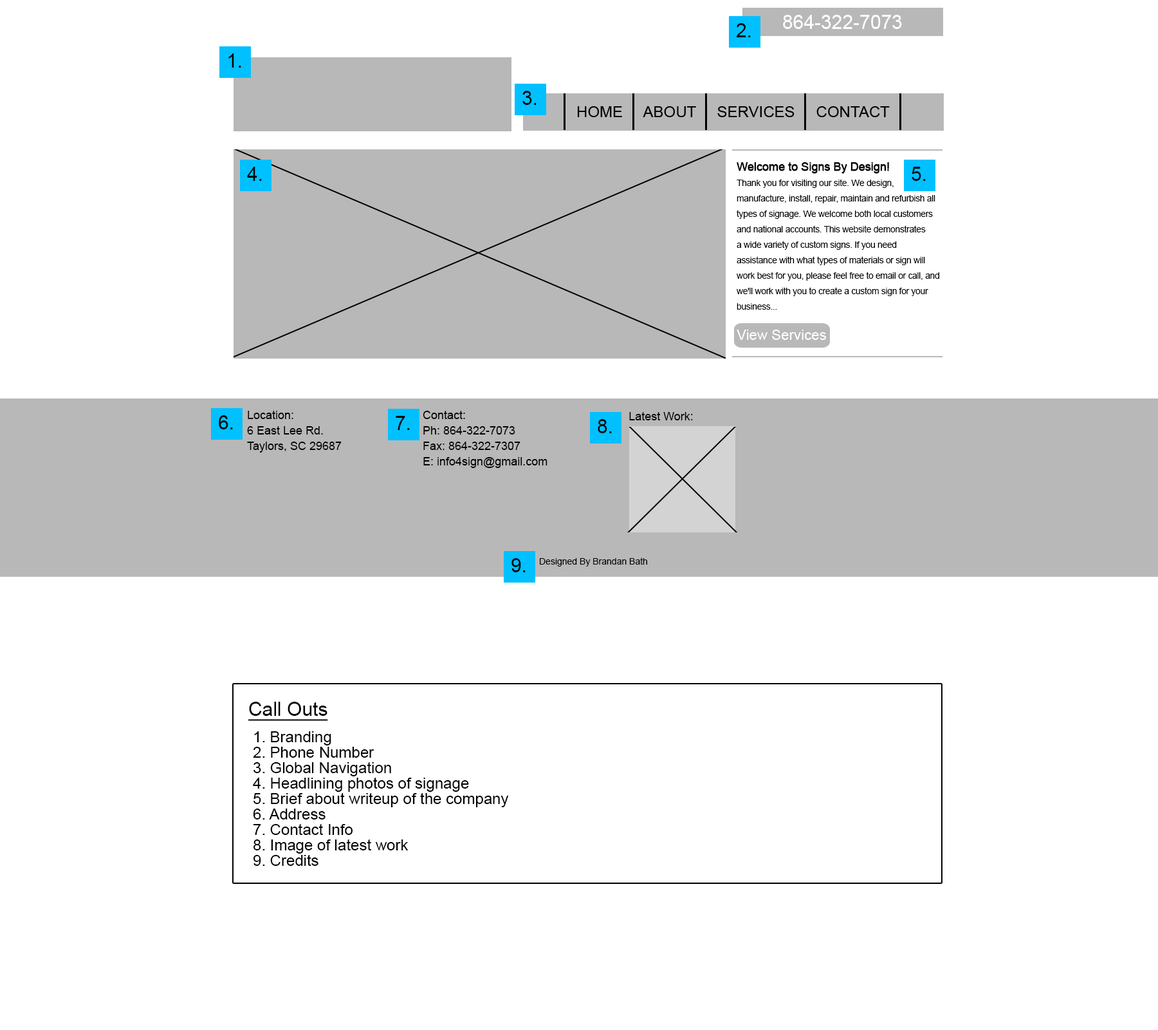
<style>
.page{position:relative;width:1158px;height:1030px;background:#ffffff}
.page>*{position:absolute;margin:0}
.t1{font:19.3px "ArialMT";color:#ffffff}
.t2{font:19.3px "ArialMT";color:#000203}
.t3{font:9px/15.4px "ArialMT";letter-spacing:-0.025em;color:#000000}
.t4{font:11.6px/15.4px "ArialMT";letter-spacing:-0.025em;color:#000000;font-weight:bold}
.t5{font:14.3px "ArialMT";color:#ffffff}
.t6{font:11.6px/15.4px "ArialMT";color:#000000}
.t7{font:11.6px "ArialMT";color:#000000}
.t8{font:9px "ArialMT";color:#000000}
.t9{font:19.3px "ArialMT";color:#000000;text-decoration:underline}
.t10{font:15.4px/15.4px "ArialMT";color:#000000}
</style>
<div class="page">
<p class="t1" style="left:783px;top:15px;width:119px;height:14px">864-322-7073</p>
<p class="t2" style="left:736px;top:23px;width:15px;height:14px">2.</p>
<p class="t2" style="left:228px;top:53px;width:13px;height:15px">1.</p>
<p class="t2" style="left:522px;top:91px;width:15px;height:14px">3.</p>
<p class="t2" style="left:247px;top:167px;width:15px;height:14px">4.</p>
<p class="t3" style="left:737px;top:162px;width:202px;height:148px"><span class="t4">Welcome to Signs By Design!<br></span>Thank you for visiting our site. We design, <br>manufacture, install, repair, maintain and refurbish all <br>types of signage. We welcome both local customers <br>and national accounts. This website demonstrates<br>a wide variety of custom signs. If you need <br>assistance with what types of materials or sign will <br>work best for you, please feel free to email or call, and <br>we'll work with you to create a custom sign for your <br>business...</p>
<p class="t2" style="left:912px;top:167px;width:14px;height:14px">5.</p>
<p class="t5" style="left:737px;top:329px;width:90px;height:11px">View Services</p>
<p class="t6" style="left:247px;top:411px;width:95px;height:41px">Location:<br>6 East Lee Rd.<br>Taylors, SC 29687</p>
<p class="t6" style="left:423px;top:411px;width:125px;height:57px">Contact:<br>Ph: 864-322-7073<br>Fax: 864-322-7307<br>E: info4sign@gmail.com</p>
<p class="t7" style="left:629px;top:412px;width:64px;height:8px">Latest Work:</p>
<p class="t2" style="left:219px;top:415px;width:14px;height:14px">6.</p>
<p class="t2" style="left:396px;top:416px;width:14px;height:14px">7.</p>
<p class="t2" style="left:598px;top:419px;width:14px;height:14px">8.</p>
<p class="t2" style="left:512px;top:558px;width:14px;height:14px">9.</p>
<p class="t8" style="left:540px;top:557px;width:107px;height:9px">Designed By Brandan Bath</p>
<p class="t9" style="left:248px;top:701px;width:80px;height:20px">Call Outs</p>
<p class="t10" style="left:253px;top:731px;width:256px;height:134px">1. Branding<br>2. Phone Number<br>3. Global Navigation<br>4. Headlining photos of signage<br>5. Brief about writeup of the company<br>6. Address<br>7. Contact Info<br>8. Image of latest work<br>9. Credits</p>
</div>
